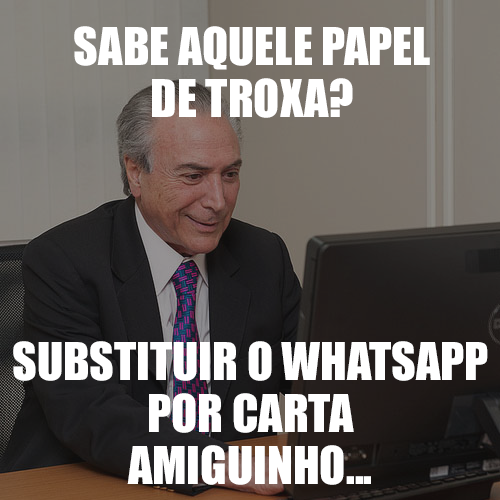
<style>
.page{position:relative;width:500px;height:500px}
.page>*{position:absolute;margin:0}
.t1{font:48px/16px "Impact";color:#ffffff;text-transform:uppercase}
</style>
<div class="page">
<p class="t1" style="left:74px;top:26px;width:356px;height:92px;text-align:center">SABE AQUELE PAPEL<br><br>DE TROXA?</p>
<p class="t1" style="left:13px;top:341px;width:475px;height:144px;text-align:center">substituir o whatsapp<br><br>por carta<br><br>amiguinho...</p>
</div>
